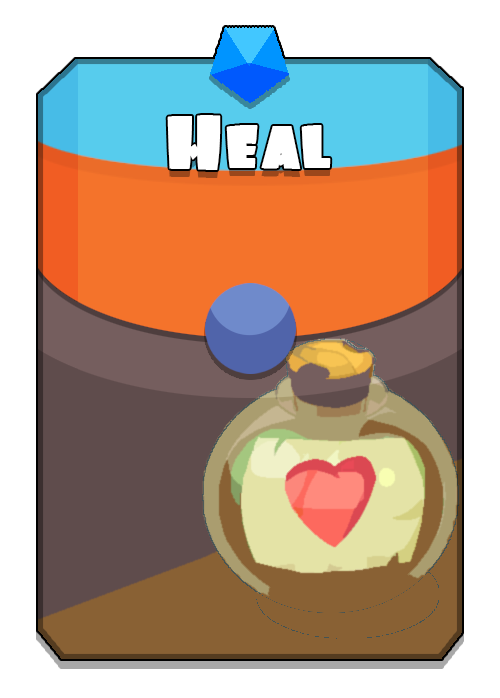
<style>
.page{position:relative;width:500px;height:698px;background:#ffffff}
.page>*{position:absolute;margin:0}
.t1{font:69px "Foo";color:#ffffff}
</style>
<div class="page">
<p class="t1" style="left:167px;top:115px;width:164px;height:55px">Heal</p>
</div>
